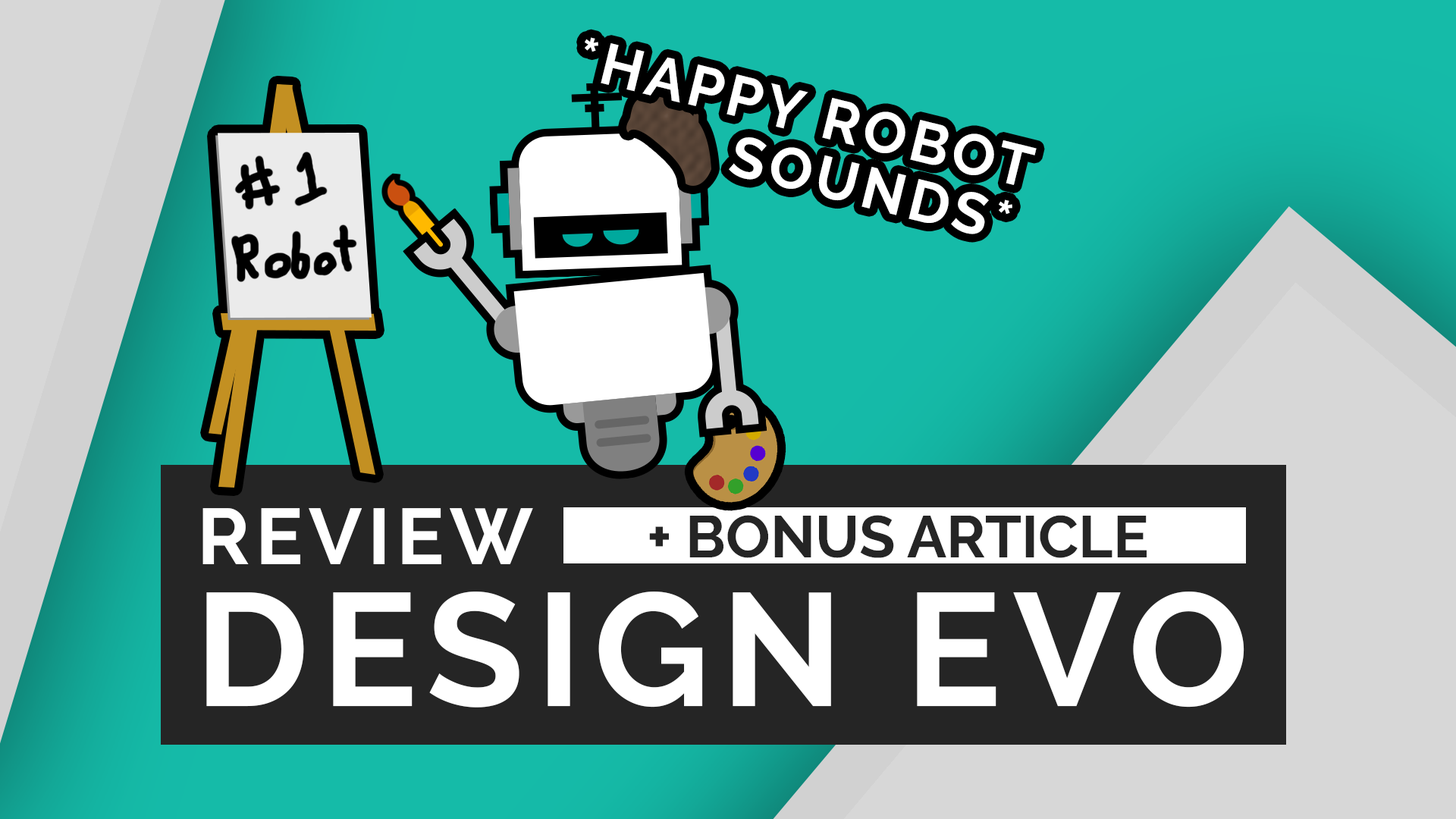
<style>
.page{position:relative;width:1456px;height:819px}
.page>*{position:absolute;margin:0}
.t1{font:57.6px/57.6px "Raleway-Bold";letter-spacing:0.075em;color:#ffffff;text-transform:uppercase}
.t2{font:78.9px "Raleway-Bold";letter-spacing:0.075em;color:#ffffff;text-transform:uppercase}
.t3{font:58.9px "Raleway-Bold";color:#252525;text-transform:uppercase}
.t4{font:159.7px "Raleway-Bold";letter-spacing:0.075em;color:#ffffff;text-transform:uppercase}
</style>
<div class="page">
<p class="t1" style="left:585px;top:37px;width:452px;height:197px;rotate:14deg">*Happy robot<br>    sounds*</p>
<p class="t2" style="left:202px;top:508px;width:331px;height:56px">Review</p>
<p class="t3" style="left:649px;top:515px;width:498px;height:43px">+ Bonus article</p>
<p class="t4" style="left:206px;top:591px;width:1038px;height:117px">Design Evo</p>
</div>
